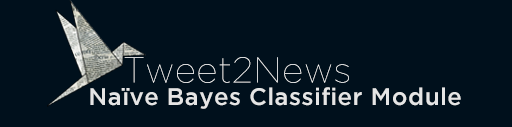
<style>
.page{position:relative;width:512px;height:127px;background:#00101c}
.page>*{position:absolute;margin:0}
.t1{font:24px "GothamMedium";letter-spacing:0.019em;color:#e5e5e5}
</style>
<div class="page">
<p class="t1" style="left:90px;top:87px;width:371px;height:22px">Naïve Bayes Classifier Module</p>
</div>
